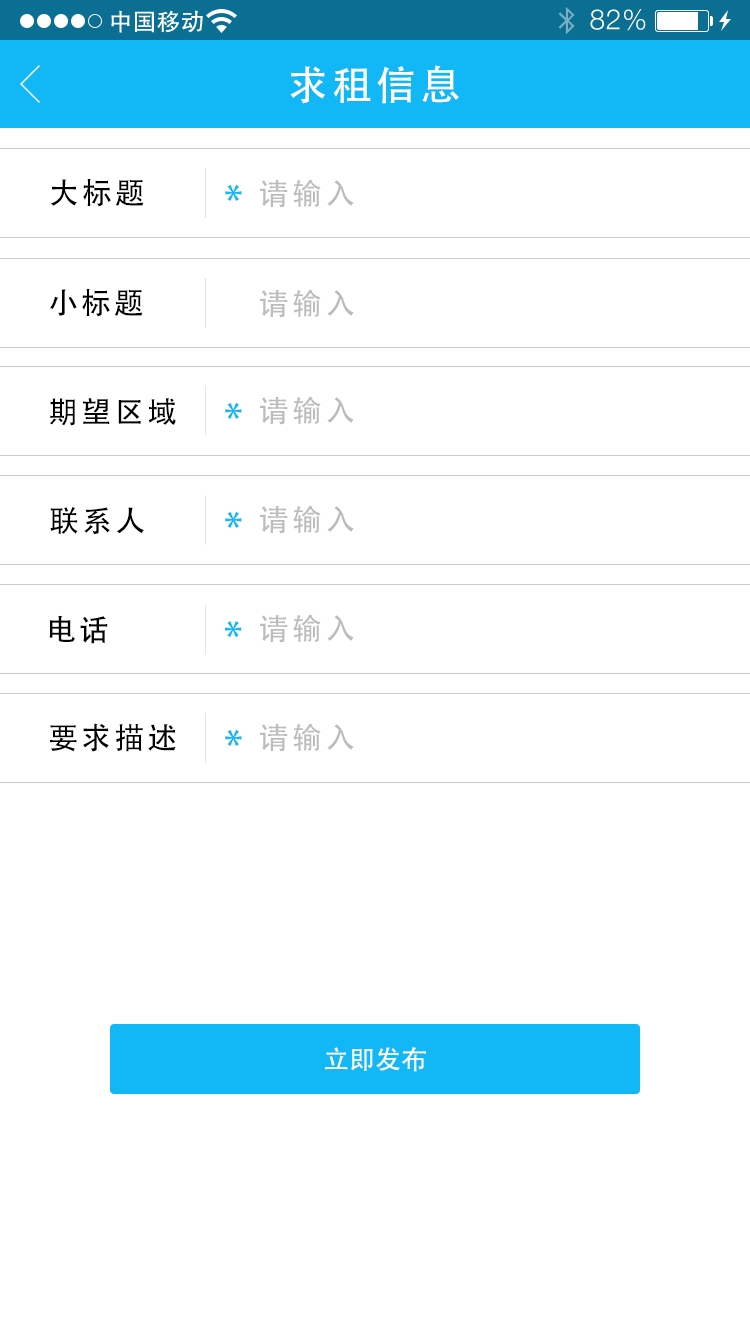
<style>
.page{position:relative;width:750px;height:1334px;background:#ffffff}
.page>*{position:absolute;margin:0}
.t1{font:40px "AdobeHeitiStd-Regular";letter-spacing:0.104em;color:#ffffff}
.t2{font:30px "AdobeHeitiStd-Regular";letter-spacing:0.104em;color:#000000}
.t3{font:40px "AdobeHeitiStd-Regular";letter-spacing:0.104em;color:#12b8f6}
.t4{font:30px "AdobeHeitiStd-Regular";letter-spacing:0.104em;color:#bcbcbc}
.t5{font:30px "AdobeHeitiStd-Regular";letter-spacing:0.104em;color:#010101}
.t6{font:26px "AdobeHeitiStd-Regular";color:#ffffff}
</style>
<div class="page">
<p class="t1" style="left:290px;top:65px;width:169px;height:39px">求租信息</p>
<p class="t2" style="left:50px;top:178px;width:94px;height:29px">大标题</p>
<p class="t3" style="left:225px;top:184px;width:17px;height:17px">*</p>
<p class="t4" style="left:260px;top:179px;width:94px;height:29px">请输入</p>
<p class="t2" style="left:50px;top:288px;width:93px;height:29px">小标题</p>
<p class="t4" style="left:260px;top:289px;width:94px;height:29px">请输入</p>
<p class="t2" style="left:49px;top:398px;width:127px;height:28px">期望区域</p>
<p class="t4" style="left:260px;top:396px;width:94px;height:29px">请输入</p>
<p class="t3" style="left:225px;top:402px;width:17px;height:17px">*</p>
<p class="t2" style="left:50px;top:507px;width:94px;height:27px">联系人</p>
<p class="t4" style="left:260px;top:505px;width:94px;height:29px">请输入</p>
<p class="t3" style="left:225px;top:511px;width:17px;height:17px">*</p>
<p class="t5" style="left:49px;top:615px;width:59px;height:29px">电话</p>
<p class="t4" style="left:260px;top:614px;width:94px;height:29px">请输入</p>
<p class="t3" style="left:225px;top:621px;width:17px;height:17px">*</p>
<p class="t2" style="left:50px;top:723px;width:126px;height:29px">要求描述</p>
<p class="t4" style="left:260px;top:723px;width:94px;height:29px">请输入</p>
<p class="t3" style="left:225px;top:729px;width:17px;height:17px">*</p>
<p class="t6" style="left:325px;top:1047px;width:101px;height:25px">立即发布</p>
</div>
